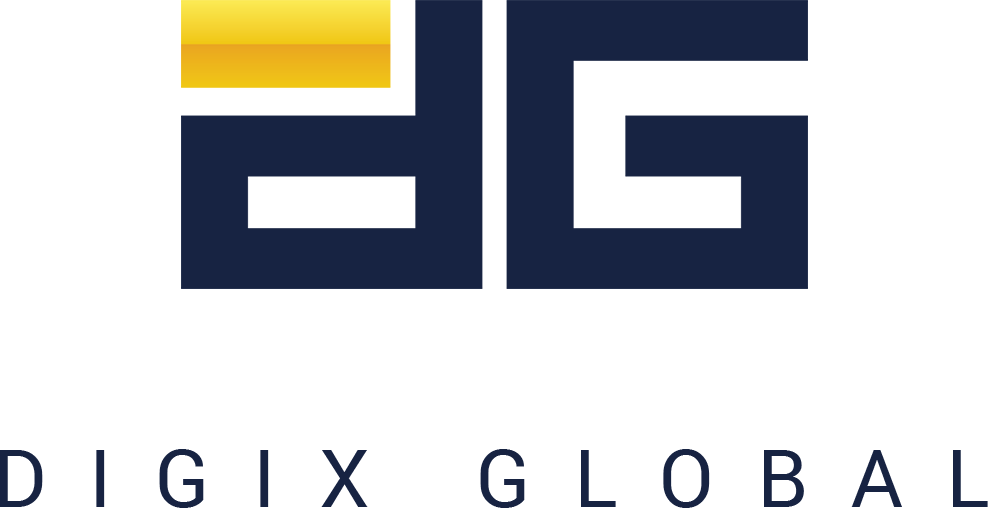
<style>
.page{position:relative;width:988px;height:508px;background:#ffffff}
.page>*{position:absolute;margin:0}
.t1{font:80px "Roboto-Regular";letter-spacing:0.54em;color:#172342;text-transform:uppercase}
</style>
<div class="page">
<p class="t1" style="left:0px;top:449px;width:988px;height:59px">Digix Global</p>
</div>
